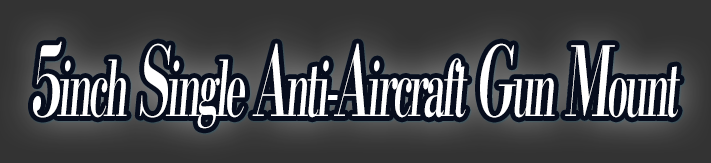
<style>
.page{position:relative;width:711px;height:163px}
.page>*{position:absolute;margin:0}
.t1{font:76.8px "KochoStd-Heavy";letter-spacing:-0.08em;color:#ffffff;font-style:italic;scale:0.5 1}
.t2{font:96px "KochoStd-Heavy";letter-spacing:-0.08em;color:#ffffff;font-style:italic;scale:0.5 1}
</style>
<div class="page">
<p class="t1" style="left:33px;top:41px;width:647px;height:88px"><span class="t2">5</span>inch<span class="t2"> S</span>ingle <span class="t2">A</span>nti-<span class="t2">A</span>ircraft<span class="t2"> G</span>un<span class="t2"> M</span>ount</p>
</div>
